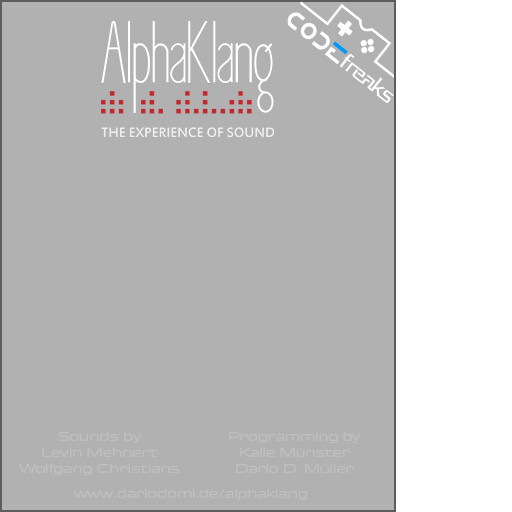
<style>
.page{position:relative;width:512px;height:512px;background:#b1b1b1}
.page>*{position:absolute;margin:0}
.t1{font:13.3px "EurostileCandyLTPro-Regular";color:#bfbfbf}
</style>
<div class="page">
<p class="t1" style="left:19px;top:432px;width:161px;height:43px;text-align:center">Sounds by<br>Levin Mehnert<br>Wolfgang Christians</p>
<p class="t1" style="left:229px;top:432px;width:132px;height:41px;text-align:center">Programming by<br>Kalle Münster<br>Dario D. Müller</p>
<p class="t1" style="left:74px;top:489px;width:233px;height:11px">www.dariodomi.de/alphaklang</p>
</div>
